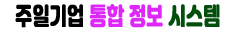
<style>
.page{position:relative;width:239px;height:32px;background:#ffffff}
.page>*{position:absolute;margin:0}
.t1{font:24px "Jalnan";color:#de27f9;font-weight:bold;scale:0.7 1}
.t2{font:24px "Jalnan";color:#000000;font-weight:bold;scale:0.7 1}
.t3{font:24px "Jalnan";color:#024f0c;font-weight:bold;scale:0.7 1}
</style>
<div class="page">
<p class="t1" style="left:15px;top:4px;width:205px;height:24px"><span class="t2">주일기업 </span>통합 정보 <span class="t3">시스템</span></p>
</div>
